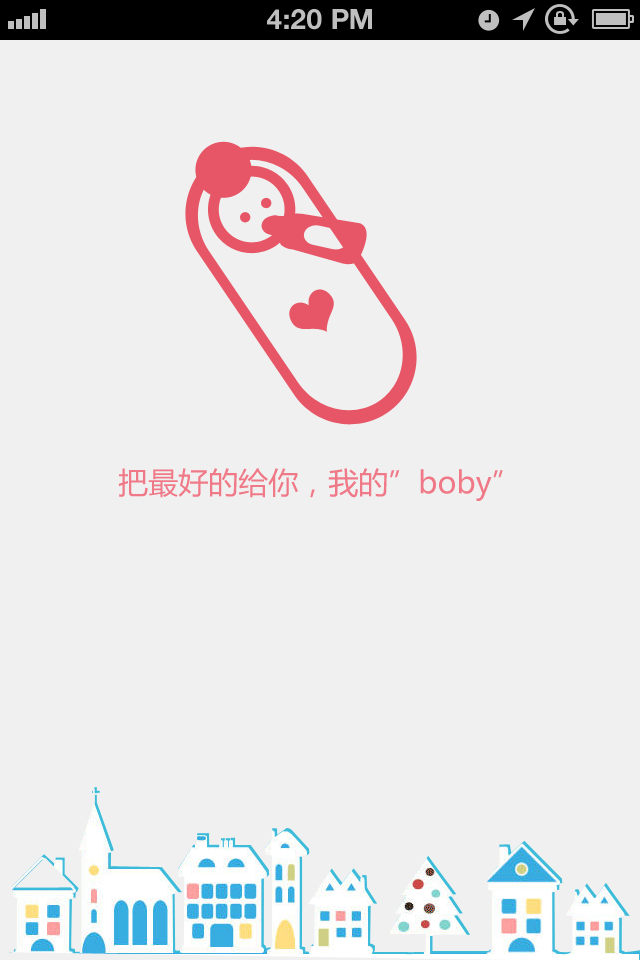
<style>
.page{position:relative;width:640px;height:960px;background:#f0f0f0}
.page>*{position:absolute;margin:0}
.t1{font:28px "HelveticaNeue-Bold";color:#bfbfbf;text-transform:uppercase}
.t2{font:30px "MicrosoftYaHei";color:#f07987}
</style>
<div class="page">
<p class="t1" style="left:267px;top:9px;width:105px;height:21px">4:20 PM</p>
<p class="t2" style="left:118px;top:468px;width:385px;height:33px">把最好的给你，我的”boby”</p>
</div>
